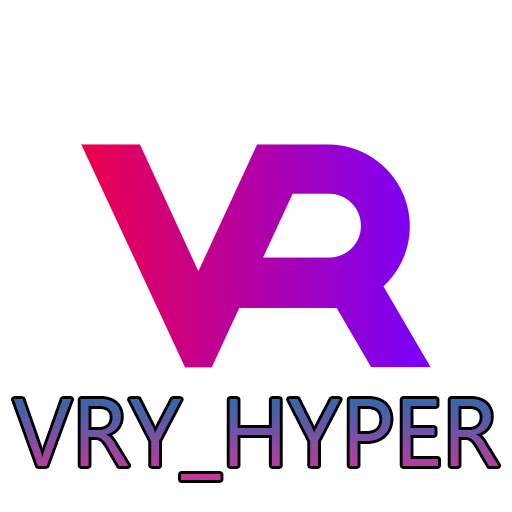
<style>
.page{position:relative;width:512px;height:512px;background:#ffffff}
.page>*{position:absolute;margin:0}
.t1{font:95px "MicrosoftNewTaiLue"}
</style>
<div class="page">
<p class="t1" style="left:13px;top:399px;width:486px;height:81px">VRY_HYPER</p>
</div>
